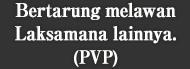
<style>
.page{position:relative;width:190px;height:69px;background:#333333}
.page>*{position:absolute;margin:0}
.t1{font:19px/24px "RyuminPro-ExBold";letter-spacing:-0.04em;color:#ffffff;font-weight:bold;scale:0.9 1}
.t2{font:18px/24px "RyuminPro-ExBold";letter-spacing:-0.04em;color:#ffffff;font-weight:bold;scale:0.9 1}
</style>
<div class="page">
<p class="t1" style="left:15px;top:2px;width:161px;height:65px;text-align:center">Bertarung melawan<br>Laksamana lainnya.<br><span class="t2">(PVP)</span></p>
</div>
